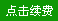
<style>
.page{position:relative;width:58px;height:21px;background:#0e9804}
.page>*{position:absolute;margin:0}
.t1{font:12px "SimSun";color:#fefefe}
</style>
<div class="page">
<p class="t1" style="left:6px;top:5px;width:47px;height:11px">点击续费</p>
</div>
